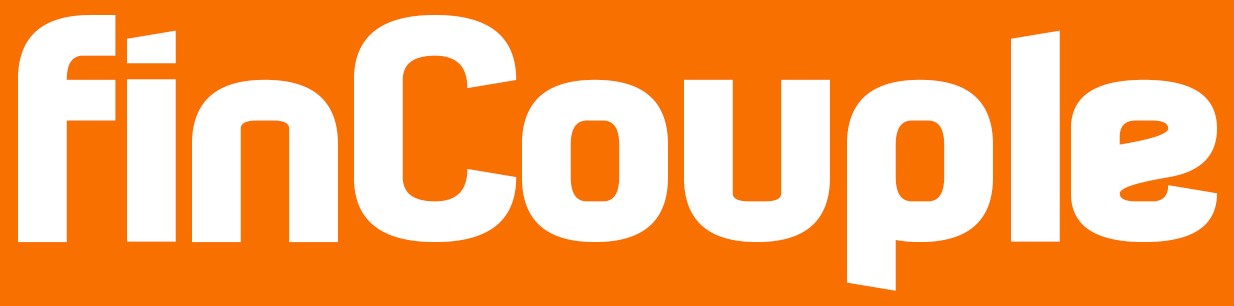
<style>
.page{position:relative;width:1234px;height:306px;background:#f87000}
.page>*{position:absolute;margin:0}
.t1{font:332px "Technoma";color:#ffffff}
</style>
<div class="page">
<p class="t1" style="left:18px;top:15px;width:1199px;height:276px">finCouple</p>
</div>
